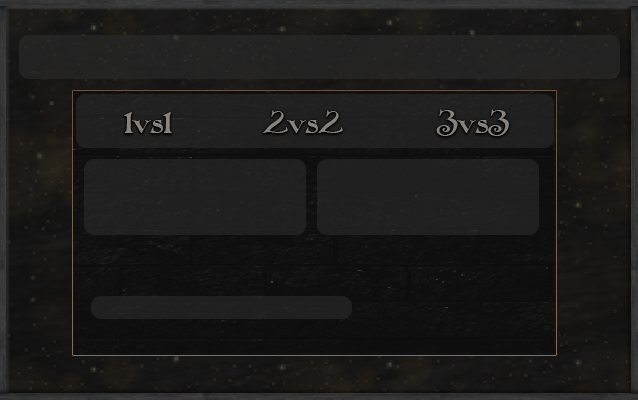
<style>
.page{position:relative;width:638px;height:400px}
.page>*{position:absolute;margin:0}
.t1{font:29.4px "Folkard";color:#88837e}
</style>
<div class="page">
<p class="t1" style="left:124px;top:112px;width:48px;height:21px">1vs1</p>
<p class="t1" style="left:263px;top:110px;width:80px;height:23px">2vs2</p>
<p class="t1" style="left:436px;top:109px;width:73px;height:27px">3vs3</p>
</div>
